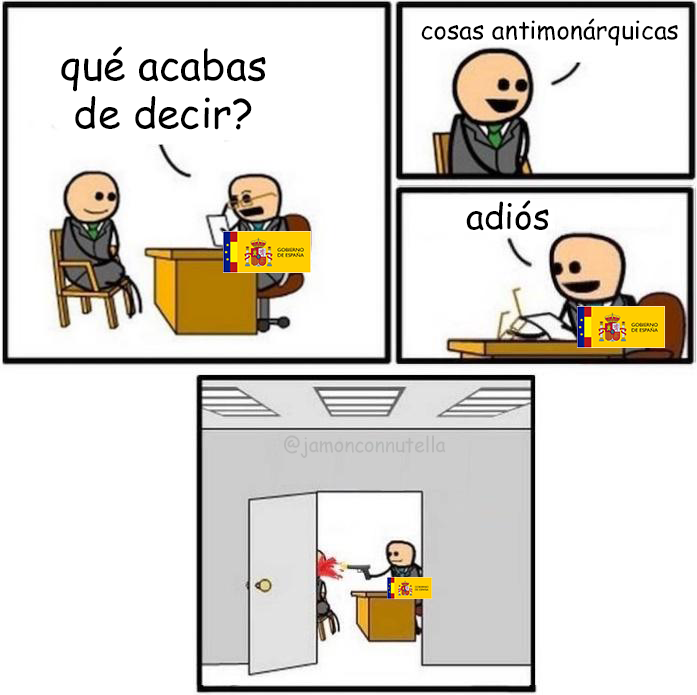
<style>
.page{position:relative;width:697px;height:695px;background:#ffffff}
.page>*{position:absolute;margin:0}
.t1{font:25.2px "ComicSansMS";color:#000000}
.t2{font:41.2px "ComicSansMS";color:#000000}
.t3{font:35.2px "ComicSansMS";color:#000000}
.t4{font:20.7px "ComicSansMS";color:#b8b8b8;scale:0.94 1}
</style>
<div class="page">
<p class="t1" style="left:421px;top:18px;width:257px;height:28px">cosas antimonárquicas</p>
<p class="t2" style="left:61px;top:46px;width:205px;height:84px;text-align:center">qué acabas<br>de decir?</p>
<p class="t3" style="left:466px;top:200px;width:83px;height:31px">adiós</p>
<p class="t4" style="left:284px;top:435px;width:162px;height:23px">@jamonconnutella</p>
</div>
